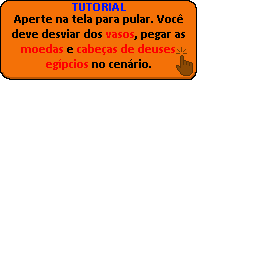
<style>
.page{position:relative;width:256px;height:256px;background:#ffffff}
.page>*{position:absolute;margin:0}
.t1{font:12.5px "Calibri-Bold";color:#000000}
.t2{font:12.5px "Calibri-Bold";color:#ff0000}
</style>
<div class="page">
<p class="t1" style="left:12px;top:14px;width:173px;height:56px;text-align:center">Aperte na tela para pular. Você deve desviar dos <span class="t2">vasos</span>, pegar as <span class="t2">moedas</span> e <span class="t2">cabeças de deuses egípcios</span> no cenário.</p>
</div>
